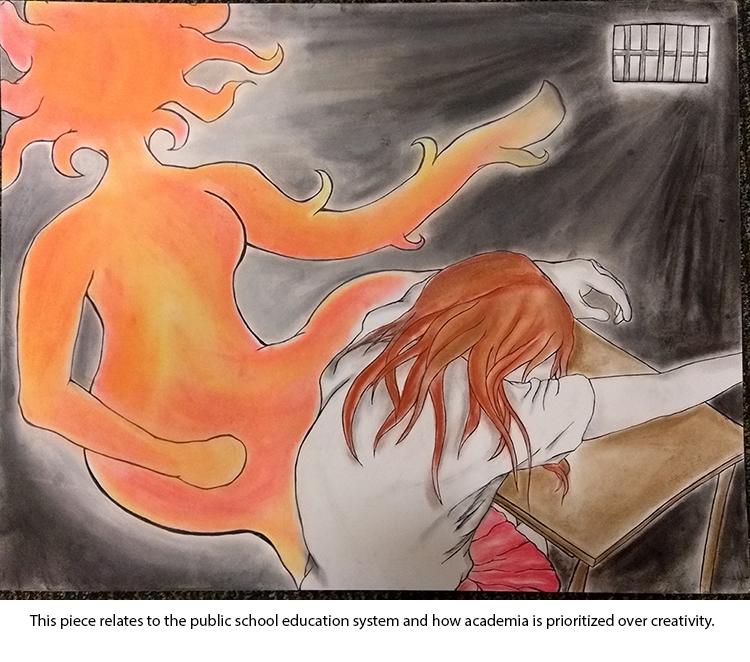
<style>
.page{position:relative;width:750px;height:662px}
.page>*{position:absolute;margin:0}
.t1{font:16px "MyriadPro-Regular";color:#000000}
</style>
<div class="page">
<p class="t1" style="left:29px;top:614px;width:686px;height:16px">This piece relates to the public school education system and how academia is prioritized over creativity.</p>
</div>
